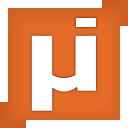
<style>
.page{position:relative;width:128px;height:128px;background:#ffffff}
.page>*{position:absolute;margin:0}
.t1{font:100px "Verdana-Bold";color:#ffffff;scale:1.15 1}
</style>
<div class="page">
<p class="t1" style="left:31px;top:35px;width:65px;height:76px">µ</p>
</div>
